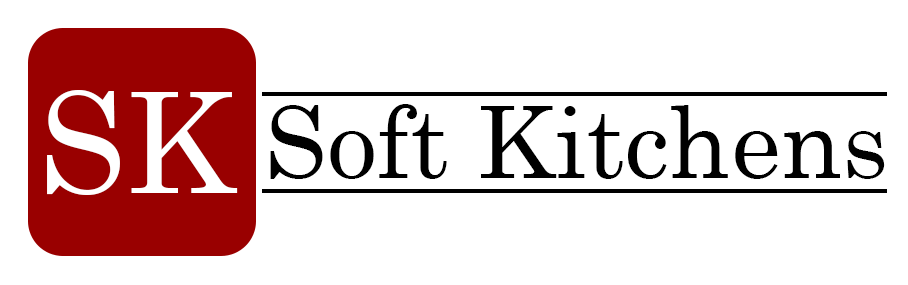
<style>
.page{position:relative;width:908px;height:285px;background:#ffffff}
.page>*{position:absolute;margin:0}
.t1{font:140px "Century";color:#ffffff}
.t2{font:100px "Century";color:#000000}
</style>
<div class="page">
<p class="t1" style="left:47px;top:90px;width:191px;height:105px">SK</p>
<p class="t2" style="left:270px;top:104px;width:615px;height:75px">Soft Kitchens</p>
</div>
